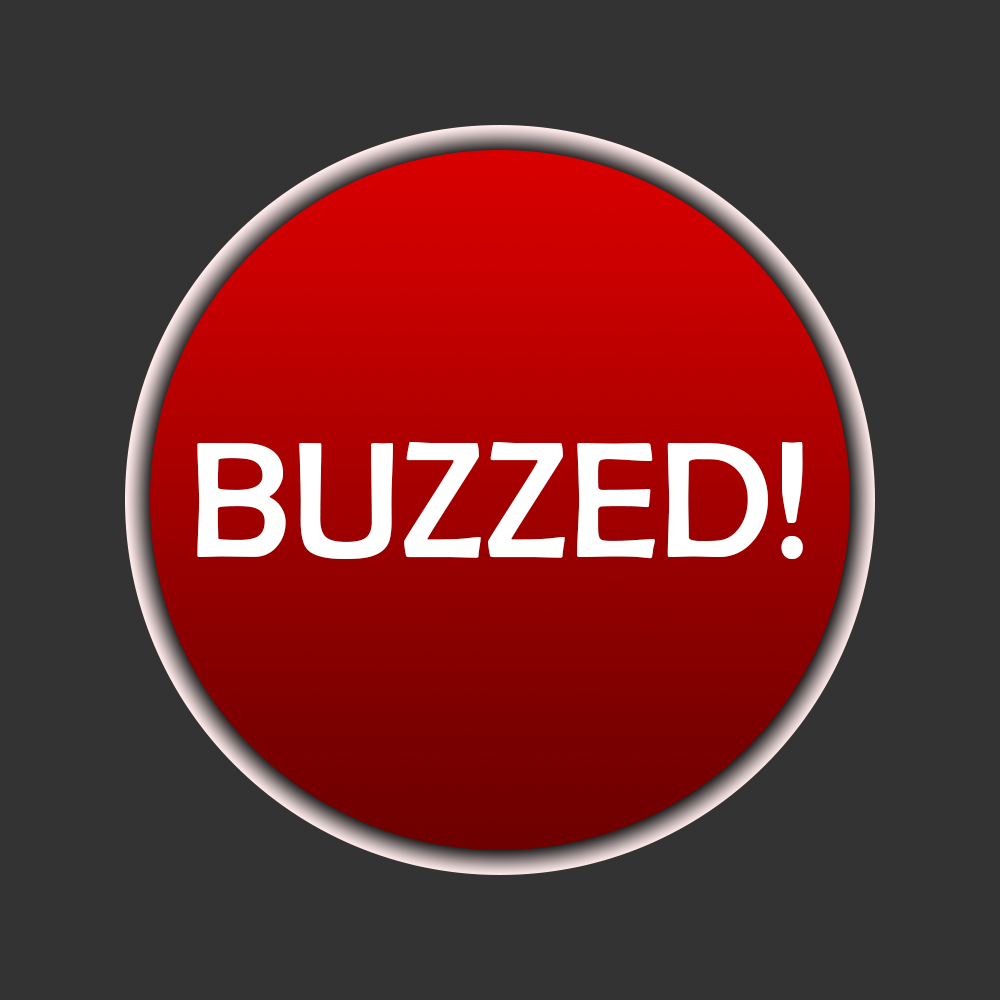
<style>
.page{position:relative;width:1000px;height:1000px;background:#333333}
.page>*{position:absolute;margin:0}
.t1{font:166.7px "BerlinSansFB-Reg";color:#ffffff}
</style>
<div class="page">
<p class="t1" style="left:197px;top:442px;width:606px;height:117px">BUZZED!</p>
</div>
